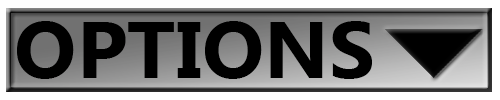
<style>
.page{position:relative;width:500px;height:100px;background:#000000}
.page>*{position:absolute;margin:0}
.t1{font:80px "LaoUI-Bold";color:#000000;scale:1.03 1}
</style>
<div class="page">
<p class="t1" style="left:17px;top:21px;width:355px;height:58px">OPTIONS</p>
</div>
